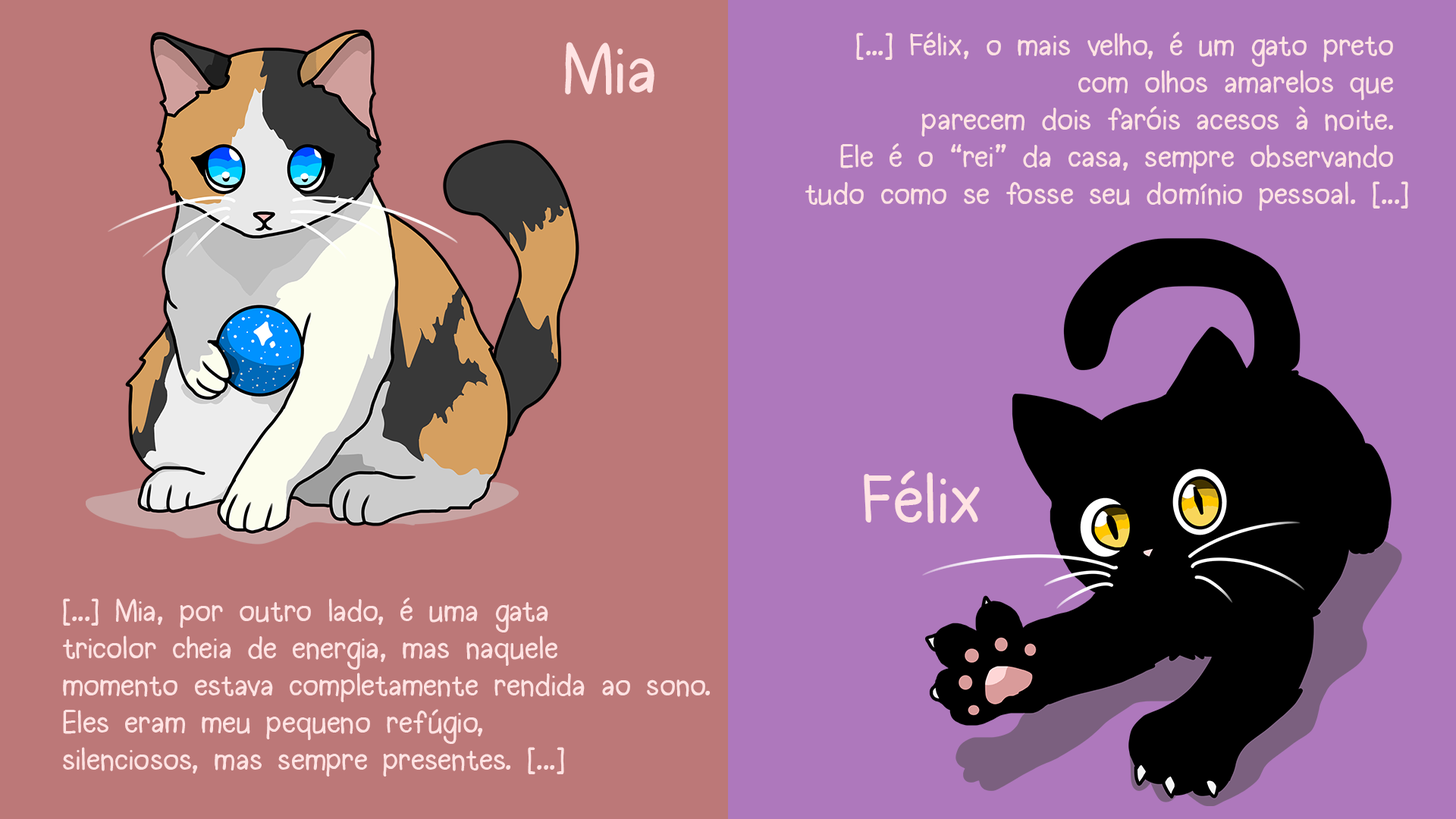
<style>
.page{position:relative;width:1456px;height:819px;background:#ae78bc}
.page>*{position:absolute;margin:0}
.t1{font:69.3px "Halogen";color:#ffe3e3}
.t2{font:30.8px "Halogen";color:#ffe3e3}
</style>
<div class="page">
<p class="t1" style="left:565px;top:42px;width:89px;height:53px">Mia</p>
<p class="t2" style="left:805px;top:32px;width:603px;height:179px;text-align:right">[...] Félix, o mais velho, é um gato preto <br>com olhos amarelos que <br>parecem dois faróis acesos à noite. <br>Ele é o “rei” da casa, sempre observando <br>tudo como se fosse seu domínio pessoal. [...]</p>
<p class="t1" style="left:864px;top:470px;width:116px;height:53px">Félix</p>
<p class="t2" style="left:62px;top:598px;width:649px;height:179px">[...] Mia, por outro lado, é uma gata <br>tricolor cheia de energia, mas naquele <br>momento estava completamente rendida ao sono. <br>Eles eram meu pequeno refúgio, <br>silenciosos, mas sempre presentes. [...]</p>
</div>
